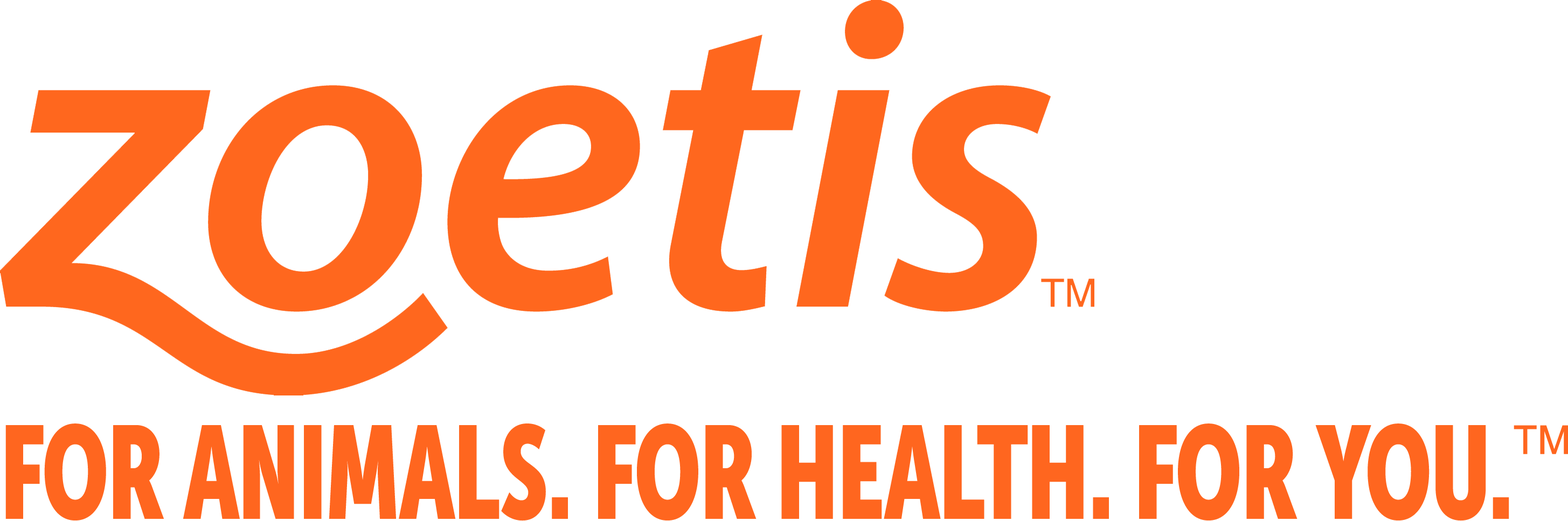
<style>
.page{position:relative;width:1568px;height:521px;background:#ffffff}
.page>*{position:absolute;margin:0}
.t1{font:130.8px "MuseoSansCond-900";letter-spacing:-0.03em;color:#ff661f;font-weight:bold;scale:0.8 1}
.t2{font:39.4px "ArialMT";color:#ff661f;font-weight:bold}
</style>
<div class="page">
<p class="t1" style="left:5px;top:424px;width:1504px;height:97px">FOR ANIMALS. FOR HEALTH. FOR YOU.</p>
<p class="t2" style="left:1514px;top:425px;width:54px;height:29px">TM</p>
</div>
